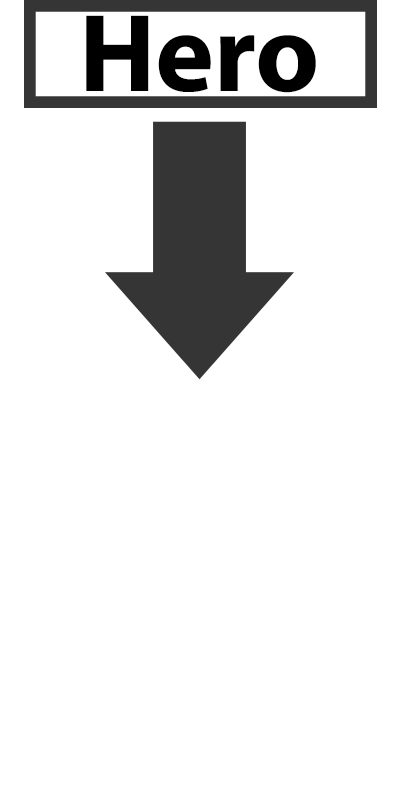
<style>
.page{position:relative;width:400px;height:800px;background:#ffffff}
.page>*{position:absolute;margin:0}
.t1{font:111.1px "MyriadPro-Bold";color:#000000}
</style>
<div class="page">
<p class="t1" style="left:86px;top:15px;width:230px;height:78px">Hero</p>
</div>
